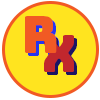
<style>
.page{position:relative;width:100px;height:100px;background:#ffe41f}
.page>*{position:absolute;margin:0}
.t1{font:51.3px "Bungee-Regular";letter-spacing:0.01em;color:#f15a24;scale:0.96 1}
.t2{font:51.3px "Bungee-Regular";letter-spacing:0.01em;color:#c1272d;scale:0.96 1}
.t3{font:51.3px "Bungee-Regular";letter-spacing:0.01em;scale:0.96 1}
</style>
<div class="page">
<p class="t1" style="left:25px;top:16px;width:32px;height:37px">R</p>
<p class="t1" style="left:28px;top:19px;width:32px;height:37px">R</p>
<p class="t2" style="left:44px;top:35px;width:30px;height:37px">X</p>
<p class="t3" style="left:47px;top:38px;width:30px;height:37px">X</p>
</div>
